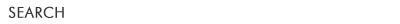
<style>
.page{position:relative;width:400px;height:24px;background:#ffffff}
.page>*{position:absolute;margin:0}
.t1{font:14.7px "FuturaBT-Light";letter-spacing:0.025em;color:#363636;text-transform:uppercase;font-weight:bold}
</style>
<div class="page">
<p class="t1" style="left:8px;top:6px;width:56px;height:12px">SEARCH</p>
</div>
